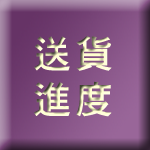
<style>
.page{position:relative;width:150px;height:150px}
.page>*{position:absolute;margin:0}
.t1{font:38px "DFHei-Bd-HK-BF";letter-spacing:0.1em}
</style>
<div class="page">
<p class="t1" style="left:34px;top:36px;width:78px;height:81px;text-align:center">送貨<br>進度</p>
</div>
